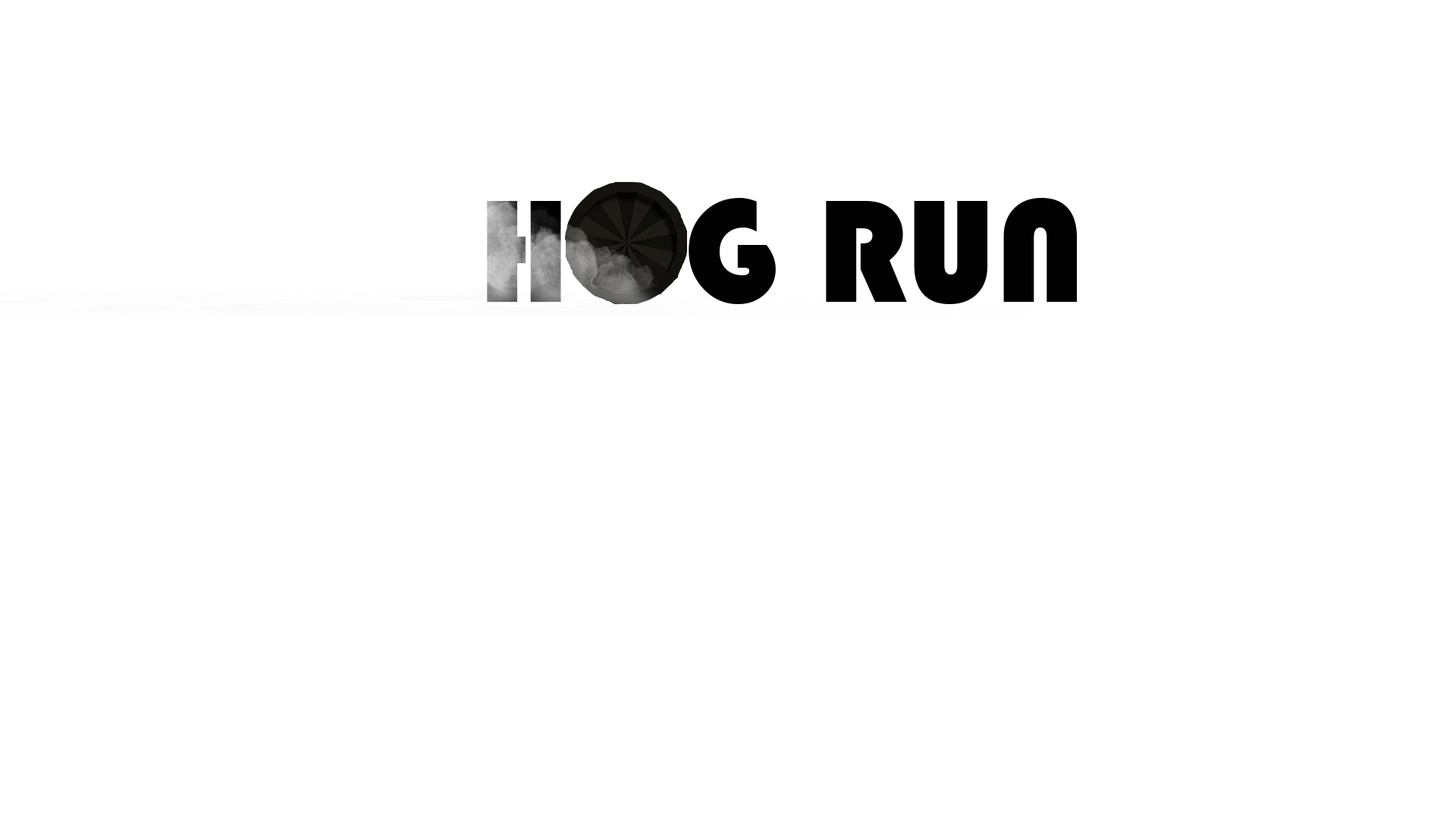
<style>
.page{position:relative;width:1456px;height:819px;background:#ffffff}
.page>*{position:absolute;margin:0}
.t1{font:151.7px "Bauhaus93";color:#010101}
</style>
<div class="page">
<p class="t1" style="left:487px;top:198px;width:591px;height:106px">HOG RUN</p>
</div>
